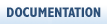
<style>
.page{position:relative;width:107px;height:24px}
.page>*{position:absolute;margin:0}
.t1{font:14px "Humanist521BT-BoldCondensed";color:#2d5078}
</style>
<div class="page">
<p class="t1" style="left:7px;top:7px;width:94px;height:10px">DOCUMENTATION</p>
</div>
